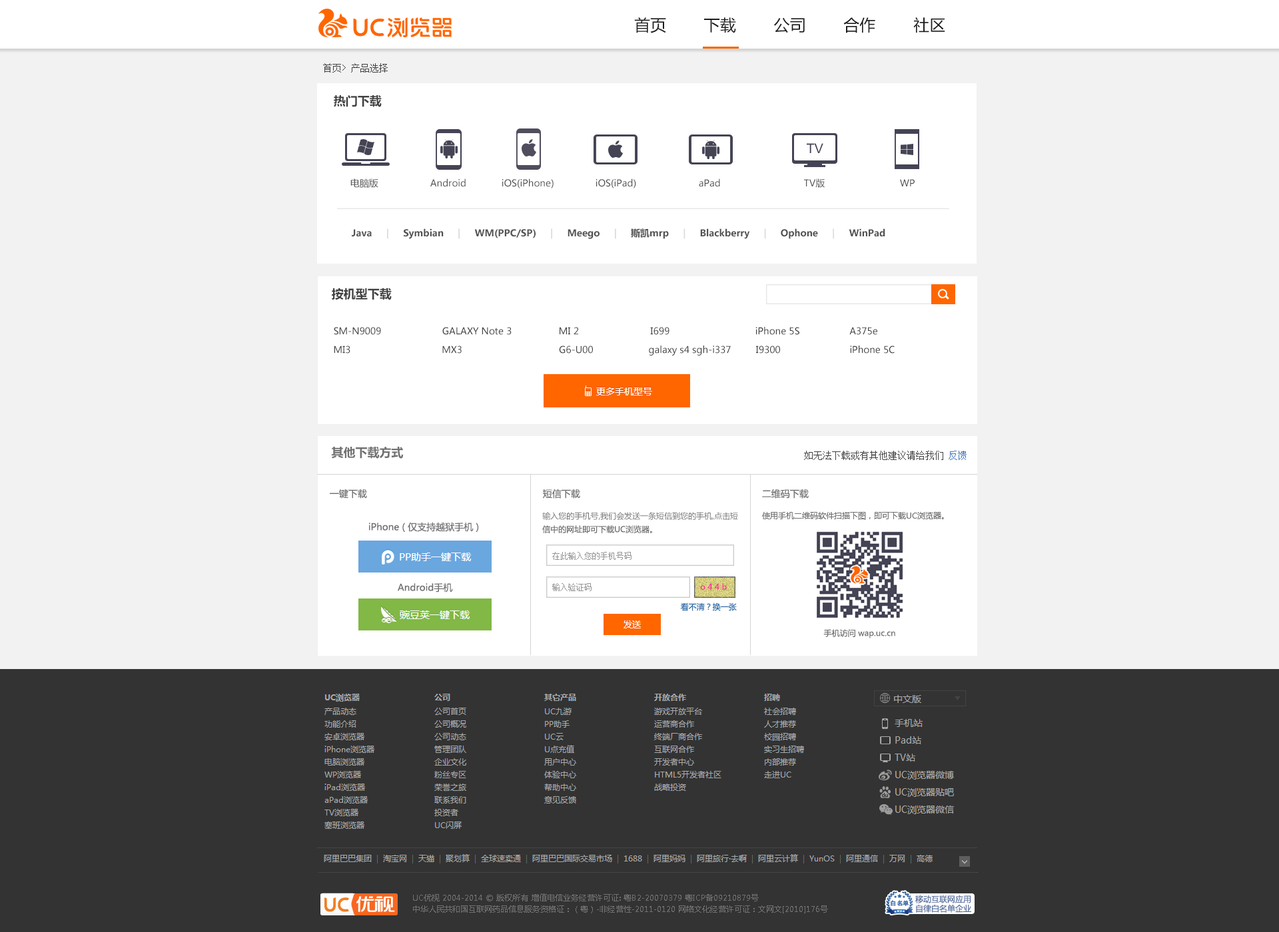
<style>
.page{position:relative;width:1279px;height:932px;background:#f2f2f2}
.page>*{position:absolute;margin:0}
.t1{font:16px "MicrosoftYaHei";color:#1c1c1c}
.t2{font:9.3px "SimSun";color:#404040}
.t3{font:12px "MicrosoftYaHei-Bold";color:#404040}
.t4{font:9.3px "MicrosoftYaHei";color:#535151}
.t5{font:9.3px "MicrosoftYaHei-Bold";color:#535151}
.t6{font:9.3px "MicrosoftYaHei-Bold";color:#dbdbdb}
.t7{font:9.3px "MicrosoftYaHei-Bold";color:#dcdcdc}
.t8{font:9.3px "MicrosoftYaHei";color:#404040}
.t9{font:12px "MicrosoftYaHei-Bold";color:#717171}
.t10{font:9.3px "SimSun";color:#4375bd}
.t11{font:9.3px "MicrosoftYaHei";color:#717171}
.t12{font:8px "MicrosoftYaHei";color:#717171}
.t13{font:8px "SimSun";color:#949494}
.t14{font:8px "SimSun";color:#959595}
.t15{font:8px "MicrosoftYaHei";color:#ff3399}
.t16{font:8px "MicrosoftYaHei";color:#256ba8}
.t17{font:8px/11.4px "MicrosoftYaHei";color:#717171}
</style>
<div class="page">
<p class="t1" style="left:634px;top:17px;width:311px;height:16px">首页        下载        公司        合作        社区</p>
<p class="t2" style="left:323px;top:63px;width:65px;height:10px">首页&gt; 产品选择</p>
<p class="t3" style="left:334px;top:95px;width:48px;height:12px">热门下载</p>
<p class="t4" style="left:350px;top:178px;width:28px;height:10px">电脑版</p>
<p class="t4" style="left:430px;top:178px;width:36px;height:9px">Android</p>
<p class="t4" style="left:502px;top:178px;width:51px;height:10px">iOS(iPhone)</p>
<p class="t4" style="left:595px;top:178px;width:41px;height:10px">iOS(iPad)</p>
<p class="t4" style="left:699px;top:178px;width:21px;height:9px">aPad</p>
<p class="t4" style="left:804px;top:178px;width:21px;height:10px">TV版</p>
<p class="t4" style="left:900px;top:179px;width:14px;height:7px">WP</p>
<p class="t5" style="left:352px;top:228px;width:533px;height:11px">Java    <span class="t6"> | </span>    Symbian    <span class="t6"> |</span>     WM(PPC/SP)     <span class="t6">|</span>     Meego     <span class="t6">| </span>    斯凯mrp    <span class="t6"> | </span>    Blackberry     <span class="t6">|</span>     Ophone     <span class="t7">| </span>    WinPad</p>
<p class="t3" style="left:332px;top:288px;width:60px;height:12px">按机型下载</p>
<p class="t8" style="left:334px;top:327px;width:543px;height:8px">SM-N9009                      GALAXY Note 3                 MI 2                          I699                               iPhone 5S                  A375e</p>
<p class="t8" style="left:334px;top:346px;width:560px;height:10px">MI3                                 MX3                                   G6-U00                    galaxy s4 sgh-i337         I9300                         iPhone 5C</p>
<p class="t9" style="left:331px;top:447px;width:73px;height:12px">其他下载方式</p>
<p class="t2" style="left:804px;top:451px;width:162px;height:9px">如无法下载或有其他建议请给我们 <span class="t10">反馈</span></p>
<p class="t11" style="left:330px;top:489px;width:37px;height:10px">一键下载</p>
<p class="t11" style="left:543px;top:489px;width:37px;height:10px">短信下载</p>
<p class="t11" style="left:762px;top:489px;width:47px;height:10px">二维码下载</p>
<p class="t12" style="left:542px;top:512px;width:196px;height:8px">输入您的手机号,我们会发送一条短信到您的手机,点击短</p>
<p class="t12" style="left:762px;top:512px;width:182px;height:8px">使用手机二维码软件扫描下图，即可下载UC浏览器。</p>
<p class="t11" style="left:368px;top:522px;width:111px;height:10px">iPhone ( 仅支持越狱手机 )</p>
<p class="t12" style="left:542px;top:526px;width:110px;height:8px">信中的网址即可下载UC浏览器。</p>
<p class="t13" style="left:552px;top:552px;width:79px;height:8px">在此输入您的手机号码</p>
<p class="t11" style="left:398px;top:583px;width:55px;height:10px">Android手机</p>
<p class="t14" style="left:552px;top:583px;width:39px;height:8px">输入验证码</p>
<p class="t15" style="left:700px;top:583px;width:27px;height:8px">o 4 4 b</p>
<p class="t16" style="left:680px;top:603px;width:57px;height:8px">看不清？换一张</p>
<p class="t12" style="left:823px;top:629px;width:72px;height:10px">手机访问 wap.uc.cn</p>
<p class="t17" style="left:413px;top:894px;width:415px;height:20px;text-align:justify">UC优视 2004-2014 © 版权所有 增值电信业务经营许可证: 粤B2-20070379 粤ICP备09210879号<br>中华人民共和国互联网药品信息服务资格证：（粤）-非经营性-2011-0120 网络文化经营许可证：文网文[2010]176号</p>
</div>
